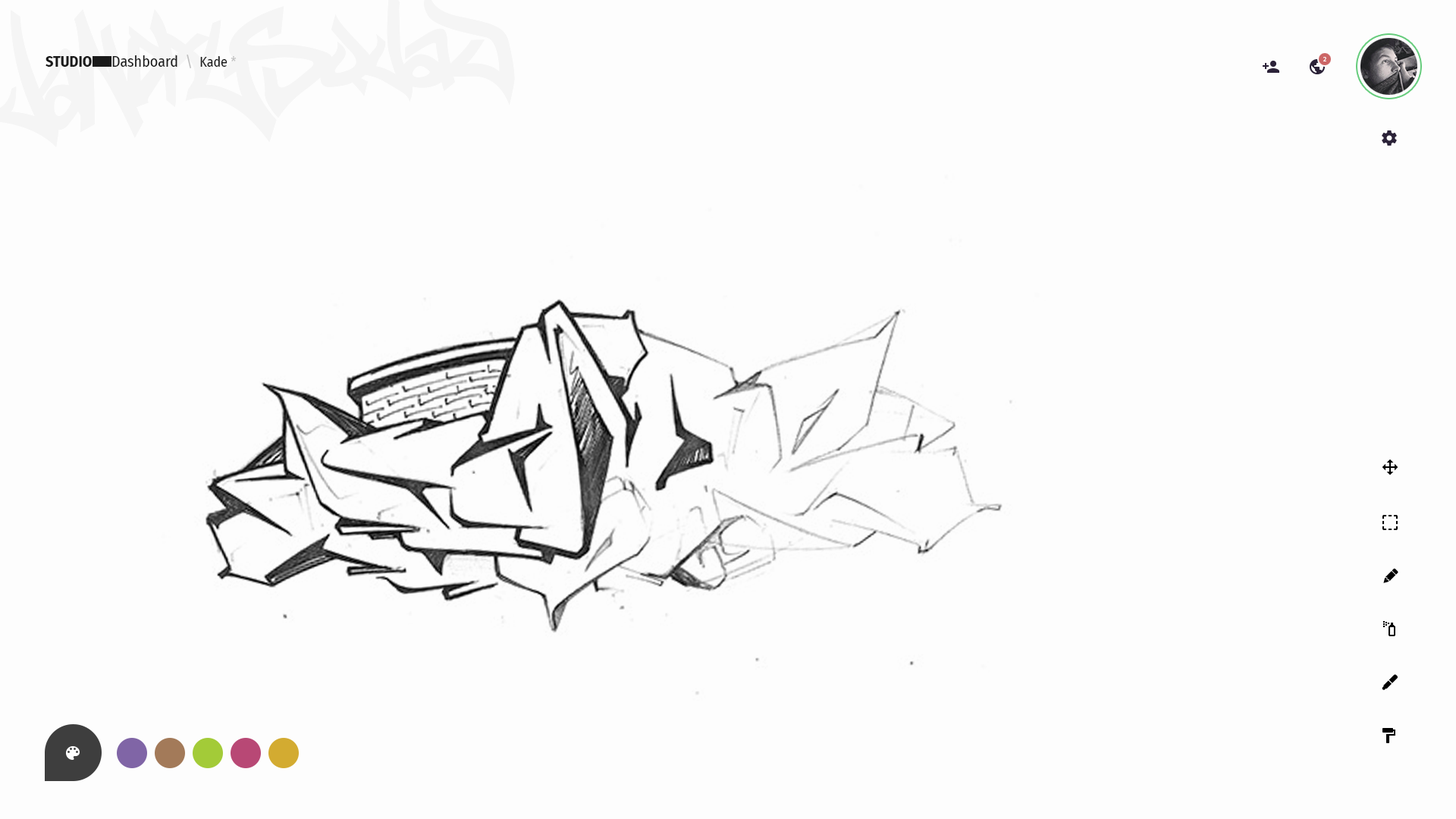
<style>
.page{position:relative;width:1456px;height:819px;background:#fdfdfd}
.page>*{position:absolute;margin:0}
.t1{font:15.2px "FiraSansCondensed-Bold";color:#1a1a1a}
.t2{font:15.2px "FiraSansCondensed-Regular";color:#1a1a1a}
.t3{font:15.2px "FiraSansCondensed-Regular";color:#bfbfbf}
.t4{font:13.6px "FiraSansCondensed-Regular";color:#1a1a1a}
.t5{font:13.6px "FiraSansCondensed-Regular";color:#bfbfbf}
.t6{font:6.1px "FiraCode-Medium";color:#ffffff}
</style>
<div class="page">
<p class="t1" style="left:45px;top:56px;width:47px;height:11px">STUDIO</p>
<p class="t2" style="left:112px;top:55px;width:125px;height:13px">Dashboard  <span class="t3">\  </span><span class="t4">Kade </span><span class="t5">*</span></p>
<p class="t6" style="left:1323px;top:57px;width:3px;height:4px">2</p>
</div>
